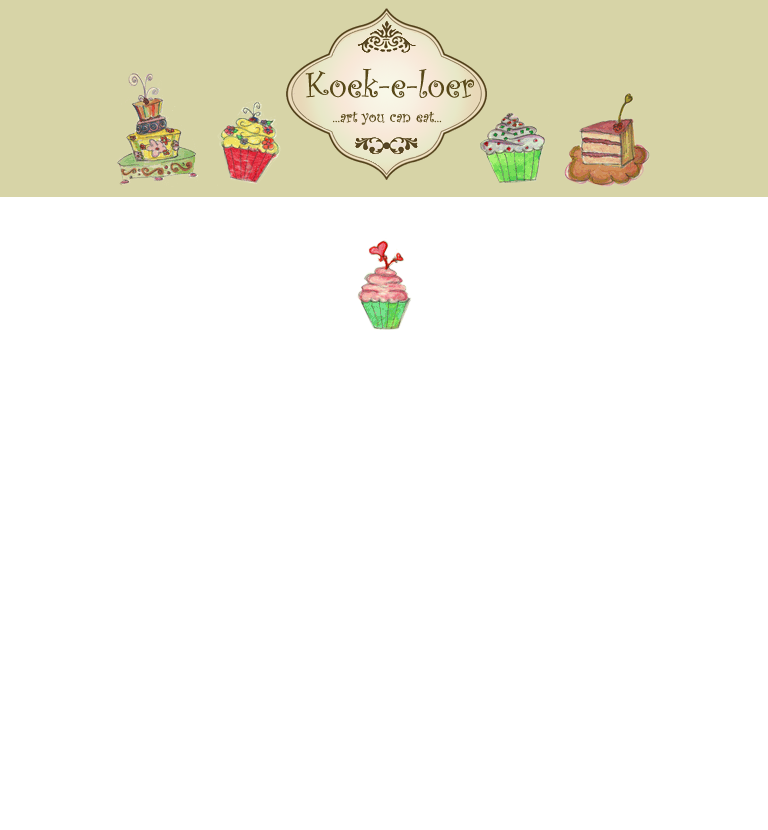
<style>
.page{position:relative;width:768px;height:830px;background:#ffffff}
.page>*{position:absolute;margin:0}
.t1{font:37.5px "CurlzMT";color:#584818}
.t2{font:16.7px "CurlzMT";color:#584818}
</style>
<div class="page">
<p class="t1" style="left:305px;top:68px;width:169px;height:30px">Koek-e-loer</p>
<p class="t2" style="left:333px;top:111px;width:109px;height:14px">...art you can eat...</p>
</div>
